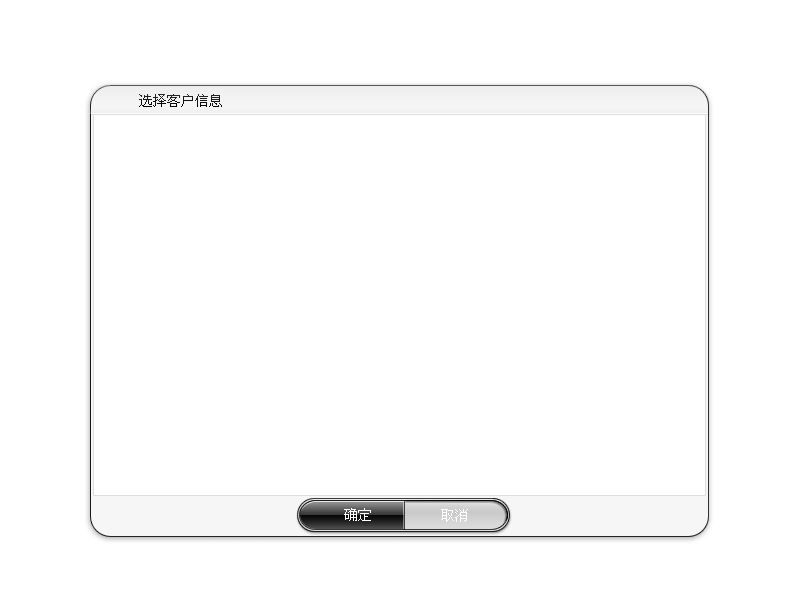
<style>
.page{position:relative;width:800px;height:600px;background:#ffffff}
.page>*{position:absolute;margin:0}
.t1{font:14px "SimSun";color:#000000}
.t2{font:14px "SimSun";color:#ffffff}
</style>
<div class="page">
<p class="t1" style="left:139px;top:94px;width:83px;height:13px">选择客户信息</p>
<p class="t2" style="left:344px;top:508px;width:27px;height:13px">确定</p>
<p class="t2" style="left:441px;top:509px;width:27px;height:13px">取消</p>
</div>
